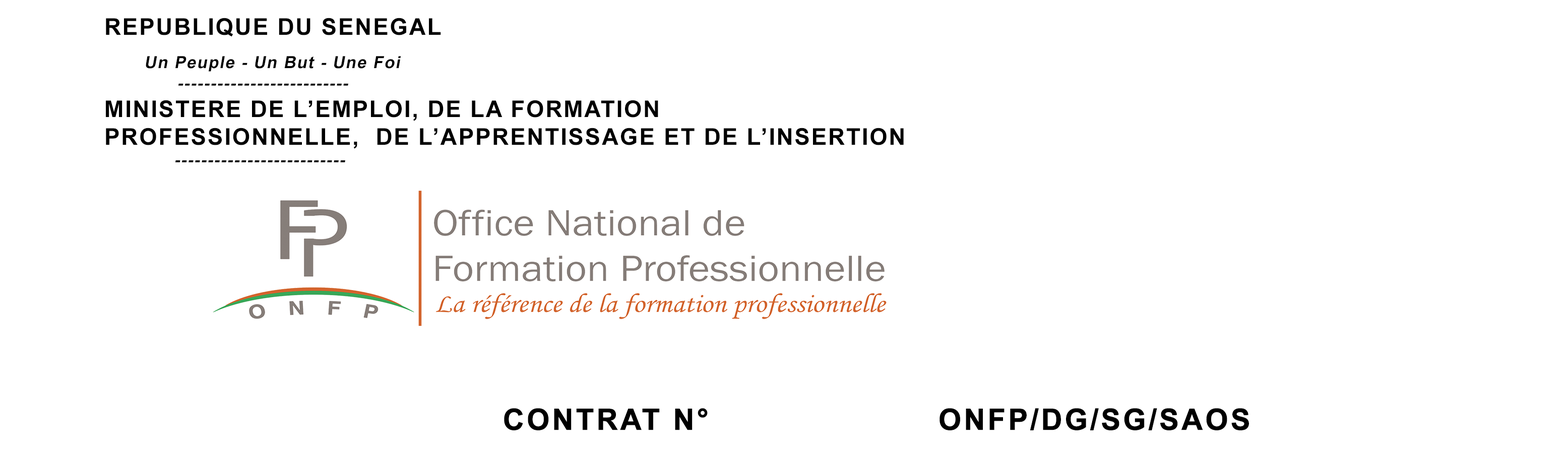
<style>
.page{position:relative;width:1568px;height:451px;background:#ffffff}
.page>*{position:absolute;margin:0}
.t1{font:23.1px "Arial-BoldMT";letter-spacing:0.06em;color:#000000}
.t2{font:16.8px "Arial-BoldMT";letter-spacing:0.06em;color:#000000;font-style:italic}
.t3{font:29.4px "Arial-BoldMT";letter-spacing:0.06em;color:#000000;font-weight:bold}
</style>
<div class="page">
<p class="t1" style="left:106px;top:18px;width:335px;height:19px">REPUBLIQUE DU SENEGAL</p>
<p class="t2" style="left:146px;top:56px;width:255px;height:16px">Un Peuple - Un But - Une Foi</p>
<p class="t2" style="left:178px;top:83px;width:170px;height:3px">--------------------------</p>
<p class="t1" style="left:106px;top:100px;width:798px;height:49px">MINISTERE DE L’EMPLOI, DE LA FORMATION<br>PROFESSIONNELLE,  DE L’APPRENTISSAGE ET DE L’INSERTION</p>
<p class="t2" style="left:175px;top:160px;width:170px;height:2px">--------------------------</p>
<p class="t3" style="left:504px;top:408px;width:745px;height:22px">CONTRAT N°              ONFP/DG/SG/SAOS</p>
</div>
